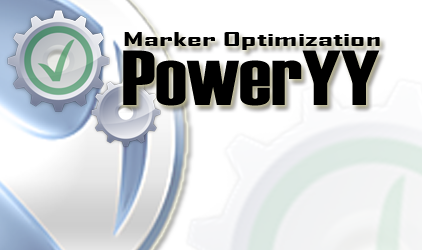
<style>
.page{position:relative;width:422px;height:250px}
.page>*{position:absolute;margin:0}
.t1{font:17.6px "AgencyFB-Bold";color:#000000;scale:2.13 1}
.t2{font:77.9px "Haettenschweiler";color:#000000;scale:1.13 1}
</style>
<div class="page">
<p class="t1" style="left:124px;top:32px;width:256px;height:18px">Marker Optimization</p>
<p class="t2" style="left:123px;top:50px;width:257px;height:56px">PowerYY</p>
</div>
